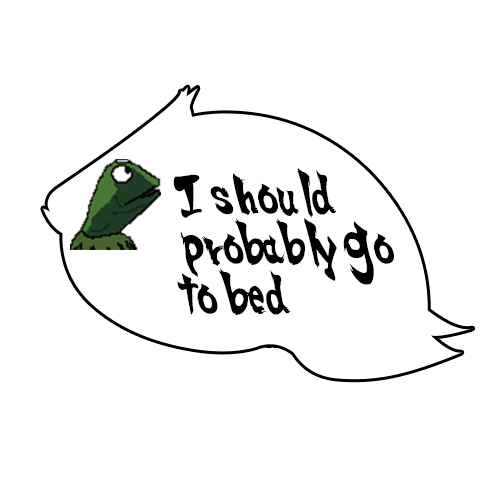
<style>
.page{position:relative;width:500px;height:500px;background:#ffffff}
.page>*{position:absolute;margin:0}
.t1{font:37.5px/50px "SSF4-ABUKET-Regular";color:#000000;scale:0.79 1}
</style>
<div class="page">
<p class="t1" style="left:173px;top:167px;width:221px;height:148px">I should probably go to bed</p>
</div>
